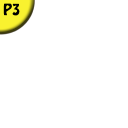
<style>
.page{position:relative;width:128px;height:128px;background:#ffffff}
.page>*{position:absolute;margin:0}
.t1{font:14px "HoboStd";color:#000000}
</style>
<div class="page">
<p class="t1" style="left:3px;top:3px;width:17px;height:13px">P3</p>
</div>
